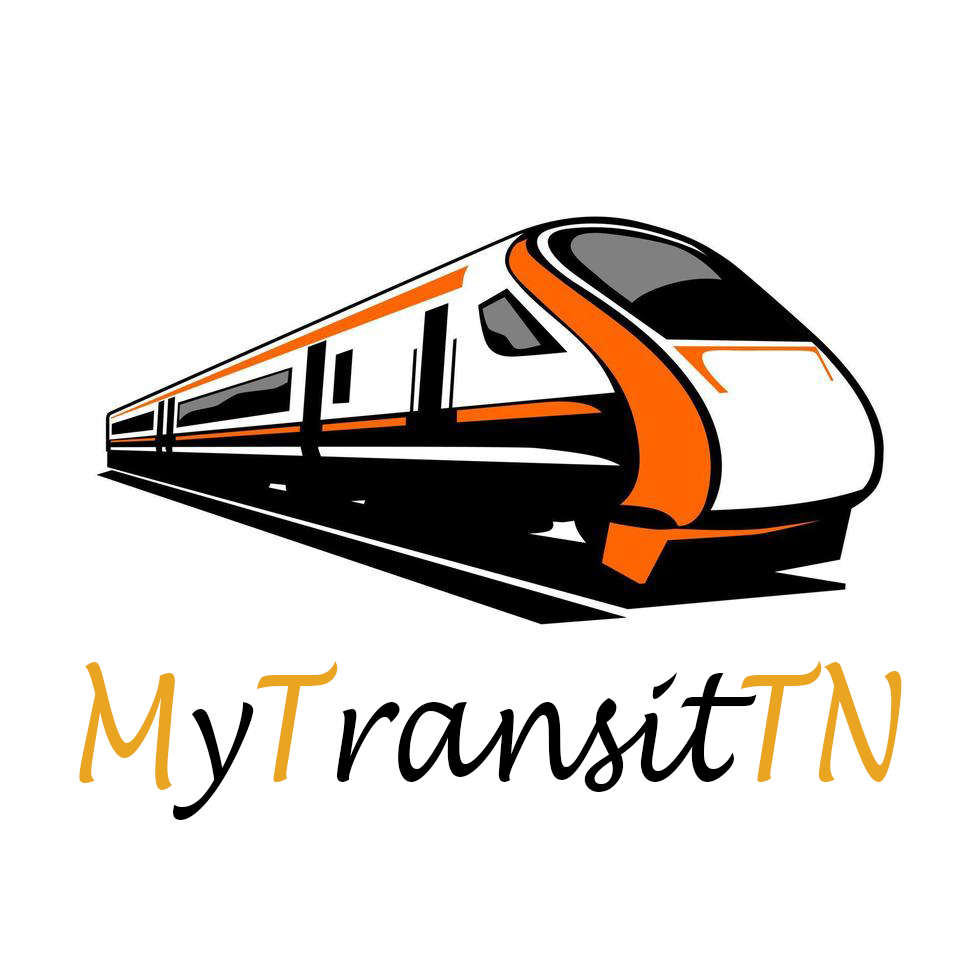
<style>
.page{position:relative;width:980px;height:980px;background:#ffffff}
.page>*{position:absolute;margin:0}
.t1{font:145.1px "LucidaHandwriting-Italic";color:#000000;scale:0.81 1}
.t2{font:145.1px "LucidaHandwriting-Italic";color:#e9a522;scale:0.81 1}
</style>
<div class="page">
<p class="t1" style="left:79px;top:661px;width:823px;height:159px"><span class="t2">M</span>y<span class="t2">T</span>ransit<span class="t2">TN</span></p>
</div>
